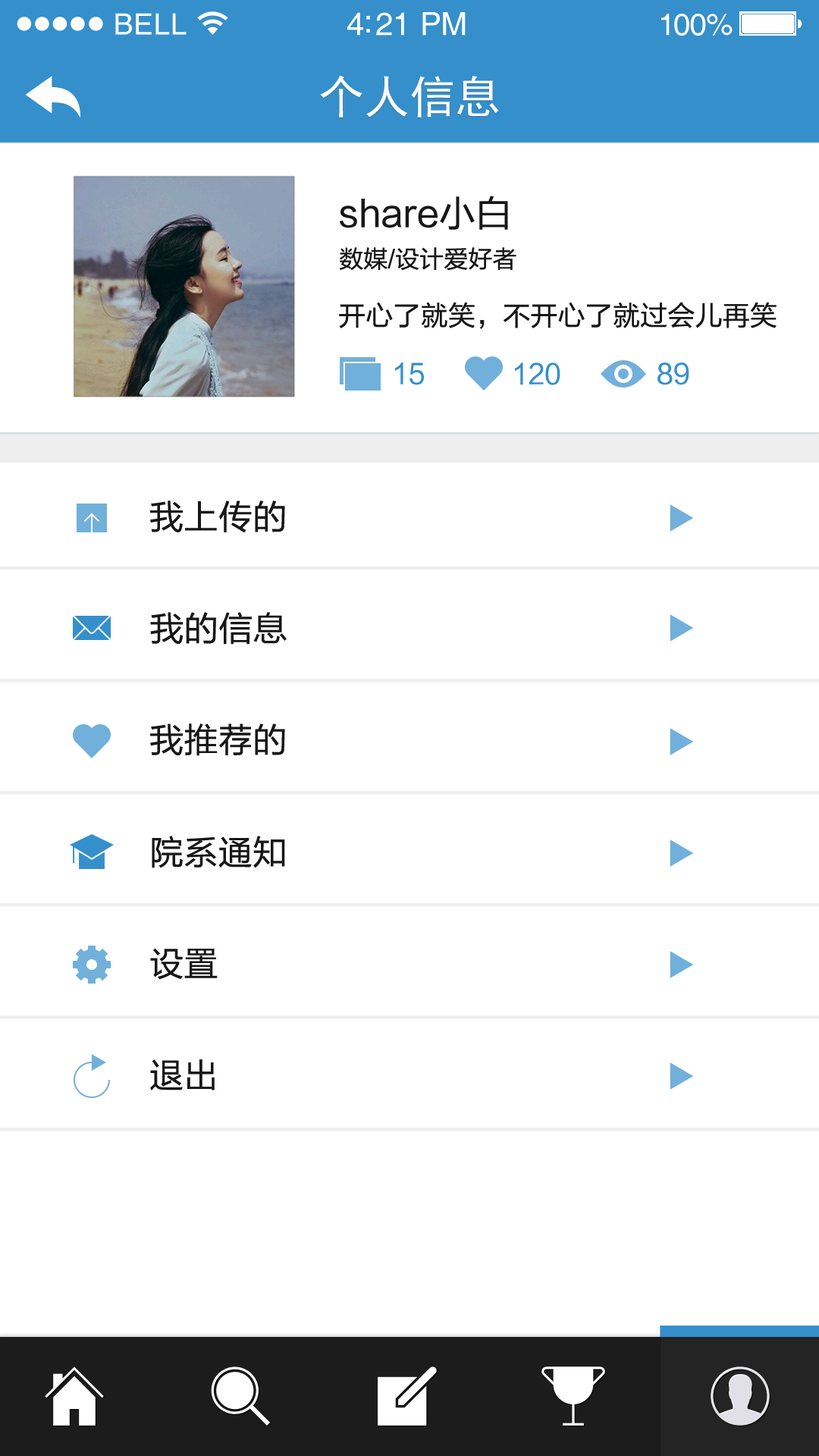
<style>
.page{position:relative;width:819px;height:1456px;background:#ffffff}
.page>*{position:absolute;margin:0}
.t1{font:29.3px "Helvetica";letter-spacing:0.02em;color:#ffffff}
.t2{font:31.8px "Helvetica";letter-spacing:-0.02em;color:#ffffff}
.t3{font:30.6px "Helvetica";letter-spacing:-0.02em;color:#ffffff}
.t4{font:45.5px "SimHei";color:#ffffff}
.t5{font:36.4px "FZLTHJW--GB1-0";color:#171717}
.t6{font:24.3px "FZLTHJW--GB1-0";letter-spacing:0.005em;color:#171717}
.t7{font:27.3px "FZLTHJW--GB1-0";letter-spacing:0.005em;color:#171717}
.t8{font:27.3px "FZLTHJW--GB1-0";color:#358fcb}
.t9{font:34.1px "FZLTHJW--GB1-0";letter-spacing:0.01em;color:#171717}
</style>
<div class="page">
<p class="t1" style="left:115px;top:13px;width:72px;height:22px">BELL</p>
<p class="t2" style="left:347px;top:12px;width:119px;height:24px">4:21 PM</p>
<p class="t3" style="left:661px;top:14px;width:72px;height:22px">100%</p>
<p class="t4" style="left:320px;top:75px;width:179px;height:43px">个人信息</p>
<p class="t5" style="left:340px;top:196px;width:168px;height:34px">share小白</p>
<p class="t6" style="left:339px;top:247px;width:177px;height:24px">数媒/设计爱好者</p>
<p class="t7" style="left:339px;top:302px;width:438px;height:27px">开心了就笑，不开心了就过会儿再笑</p>
<p class="t8" style="left:395px;top:362px;width:29px;height:23px">15</p>
<p class="t8" style="left:515px;top:362px;width:45px;height:23px">120</p>
<p class="t8" style="left:657px;top:362px;width:32px;height:23px">89</p>
<p class="t9" style="left:150px;top:500px;width:135px;height:33px">我上传的</p>
<p class="t9" style="left:150px;top:612px;width:137px;height:33px">我的信息</p>
<p class="t9" style="left:150px;top:723px;width:135px;height:33px">我推荐的</p>
<p class="t9" style="left:152px;top:836px;width:133px;height:32px">院系通知</p>
<p class="t9" style="left:150px;top:948px;width:68px;height:32px">设置</p>
<p class="t9" style="left:150px;top:1059px;width:65px;height:31px">退出</p>
</div>
